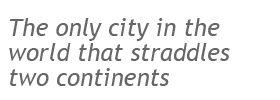
<style>
.page{position:relative;width:280px;height:100px;background:#ffffff}
.page>*{position:absolute;margin:0}
.t1{font:24px/25px "TrebuchetMS-Italic";color:#666666}
</style>
<div class="page">
<p class="t1" style="left:9px;top:18px;width:221px;height:68px">The only city in the <br>world that straddles <br>two continents</p>
</div>
